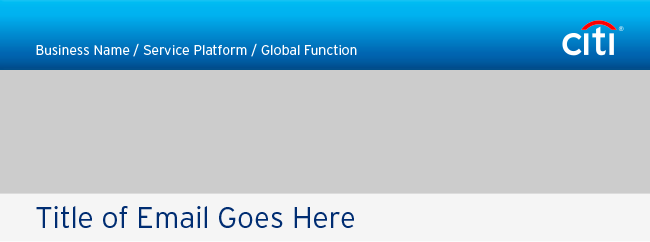
<style>
.page{position:relative;width:650px;height:242px;background:#cccccc}
.page>*{position:absolute;margin:0}
.t1{font:14px "Interstate-Light";color:#ffffff}
.t2{font:30px "Interstate-Light";color:#002d72}
</style>
<div class="page">
<p class="t1" style="left:36px;top:43px;width:321px;height:14px">Business Name / Service Platform / Global Function</p>
<p class="t2" style="left:36px;top:206px;width:318px;height:22px">Title of Email Goes Here</p>
</div>
